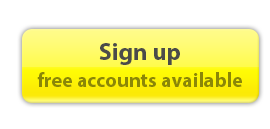
<style>
.page{position:relative;width:270px;height:129px;background:#ffffff}
.page>*{position:absolute;margin:0}
.t1{font:20px/27px "MyriadPro-Bold";color:#8b8707}
.t2{font:24.3px/27px "MyriadPro-Bold";color:#4b4b4a}
</style>
<div class="page">
<p class="t1" style="left:37px;top:43px;width:205px;height:44px;text-align:center"><span class="t2">Sign up<br></span>free accounts available</p>
</div>
